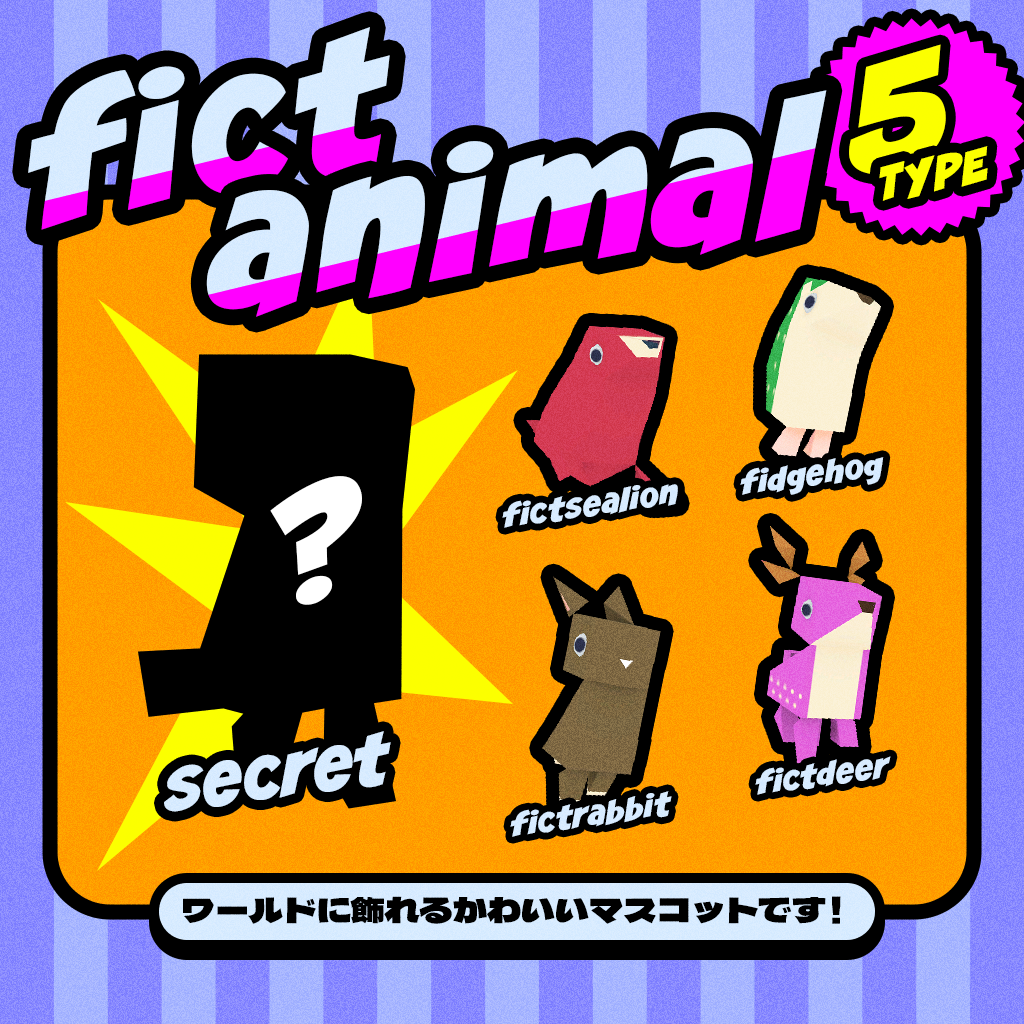
<style>
.page{position:relative;width:1024px;height:1024px;background:#000000}
.page>*{position:absolute;margin:0}
.t1{font:171.5px "CCSmash";color:#d9ecff}
.t2{font:137.8px "CCSmash";color:#fcff00}
.t3{font:171.5px "CCSmash"}
.t4{font:44.5px "CCSmash";color:#fcff00}
.t5{font:30px "CCSmash";color:#d9ecff}
.t6{font:138.2px "CCSmash";color:#ffffff}
.t7{font:65px "CCSmash";color:#d9ecff}
.t8{font:34px "DelaGothicOne-Regular";color:#000000}
</style>
<div class="page">
<p class="t1" style="left:28px;top:27px;width:362px;height:203px;rotate:-11deg">fict</p>
<p class="t2" style="left:849px;top:44px;width:97px;height:131px;rotate:-12deg">5</p>
<p class="t3" style="left:206px;top:90px;width:621px;height:227px;rotate:-8deg">animal</p>
<p class="t4" style="left:879px;top:146px;width:109px;height:55px;rotate:-11deg">TYPE</p>
<p class="t5" style="left:740px;top:457px;width:144px;height:38px;rotate:-8deg">fidgehog</p>
<p class="t6" style="left:270px;top:476px;width:92px;height:129px;rotate:-20deg">?</p>
<p class="t5" style="left:502px;top:484px;width:176px;height:44px;rotate:-8deg">fictsealion</p>
<p class="t7" style="left:164px;top:731px;width:227px;height:81px;rotate:-8deg">secret</p>
<p class="t5" style="left:755px;top:756px;width:136px;height:39px;rotate:-8deg">fictdeer</p>
<p class="t5" style="left:510px;top:791px;width:162px;height:46px;rotate:-8deg">fictrabbit</p>
<p class="t8" style="left:183px;top:896px;width:658px;height:28px">ワールドに飾れるかわいいマスコットです！</p>
</div>
